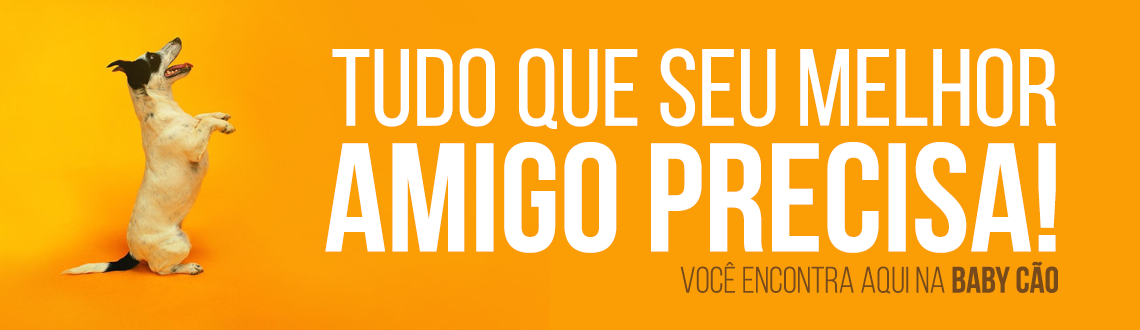
<style>
.page{position:relative;width:1140px;height:330px;background:#fb9e05}
.page>*{position:absolute;margin:0}
.t1{font:108.9px "BebasNeueRegular";color:#ffffff;text-transform:uppercase}
.t2{font:154.5px "BebasNeueBold";color:#ffffff;text-transform:uppercase}
.t3{font:36.6px "BebasNeueBook";color:#764a1b;text-transform:uppercase}
.t4{font:36.6px "BebasNeueBold";color:#764a1b;text-transform:uppercase}
</style>
<div class="page">
<p class="t1" style="left:332px;top:48px;width:724px;height:81px">TUDO QUE SEU MELHOR</p>
<p class="t2" style="left:325px;top:142px;width:731px;height:111px">AMIGO PRECISA!</p>
<p class="t3" style="left:680px;top:261px;width:378px;height:33px">VOCÊ ENCONTRA AQUI NA <span class="t4">BABY CÃO</span></p>
</div>
